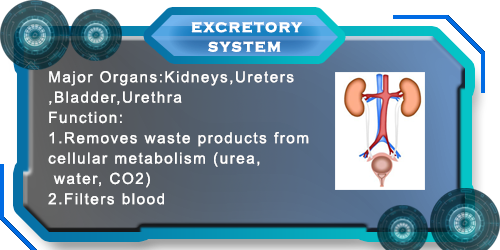
<style>
.page{position:relative;width:500px;height:250px}
.page>*{position:absolute;margin:0}
.t1{font:14px "CopperplateGothic-Bold";letter-spacing:0.1em;color:#ffffff;font-weight:bold}
.t2{font:15.2px/20.3px "ArialMT";letter-spacing:0.1em;color:#ffffff}
</style>
<div class="page">
<p class="t1" style="left:191px;top:21px;width:111px;height:12px">EXCRETORY</p>
<p class="t1" style="left:208px;top:41px;width:73px;height:12px">SYSTEM</p>
<p class="t2" style="left:48px;top:71px;width:261px;height:134px">Major Organs:Kidneys,Ureters<br>,Bladder,Urethra   <br>Function: <br>1.Removes waste products from<br>cellular metabolism (urea,<br> water, CO2)<br>2.Filters blood</p>
</div>
